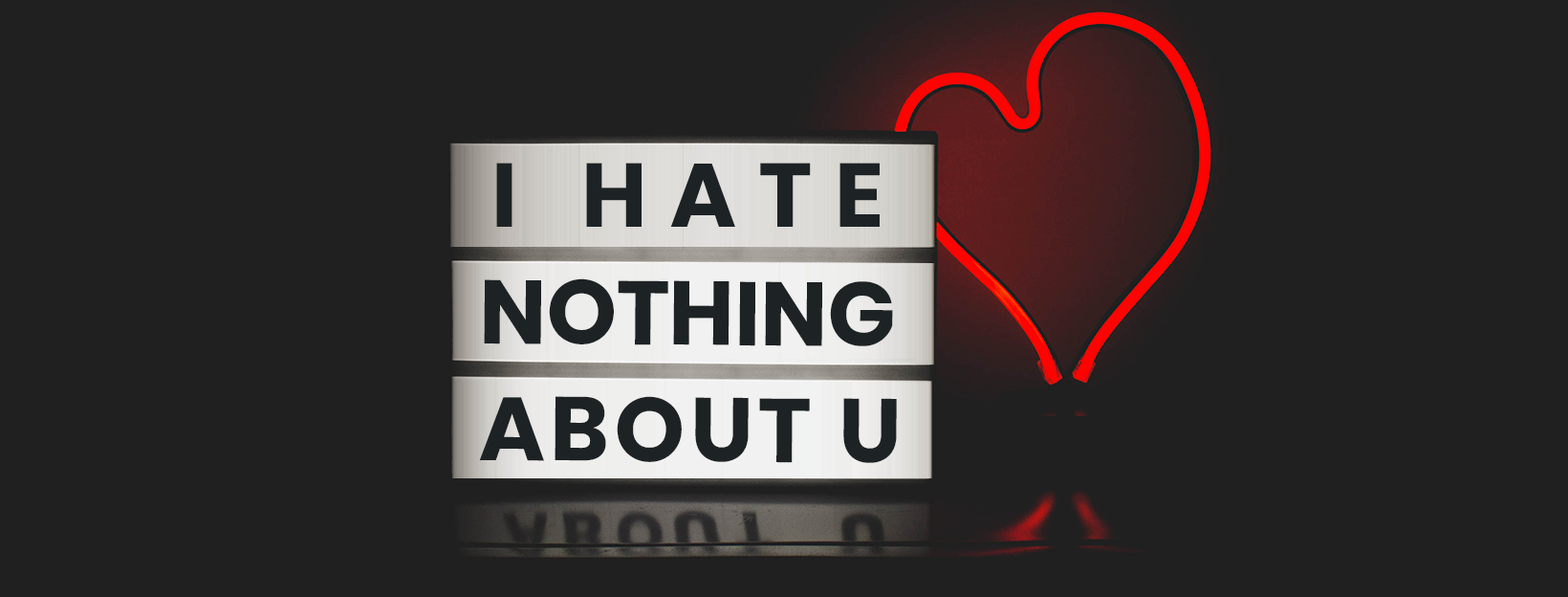
<style>
.page{position:relative;width:1568px;height:597px;background:#202020}
.page>*{position:absolute;margin:0}
.t1{font:89.9px "Poppins";letter-spacing:0.26em;color:#1d2225;text-transform:uppercase}
.t2{font:89.9px "Poppins";color:#1d2225;text-transform:uppercase}
.t3{font:89.9px "Poppins";letter-spacing:0.06em;color:#1d2225;text-transform:uppercase}
</style>
<div class="page">
<p class="t1" style="left:496px;top:163px;width:384px;height:64px">i hate</p>
<p class="t2" style="left:484px;top:278px;width:409px;height:68px">nothing</p>
<p class="t3" style="left:479px;top:396px;width:418px;height:67px">about u</p>
</div>
